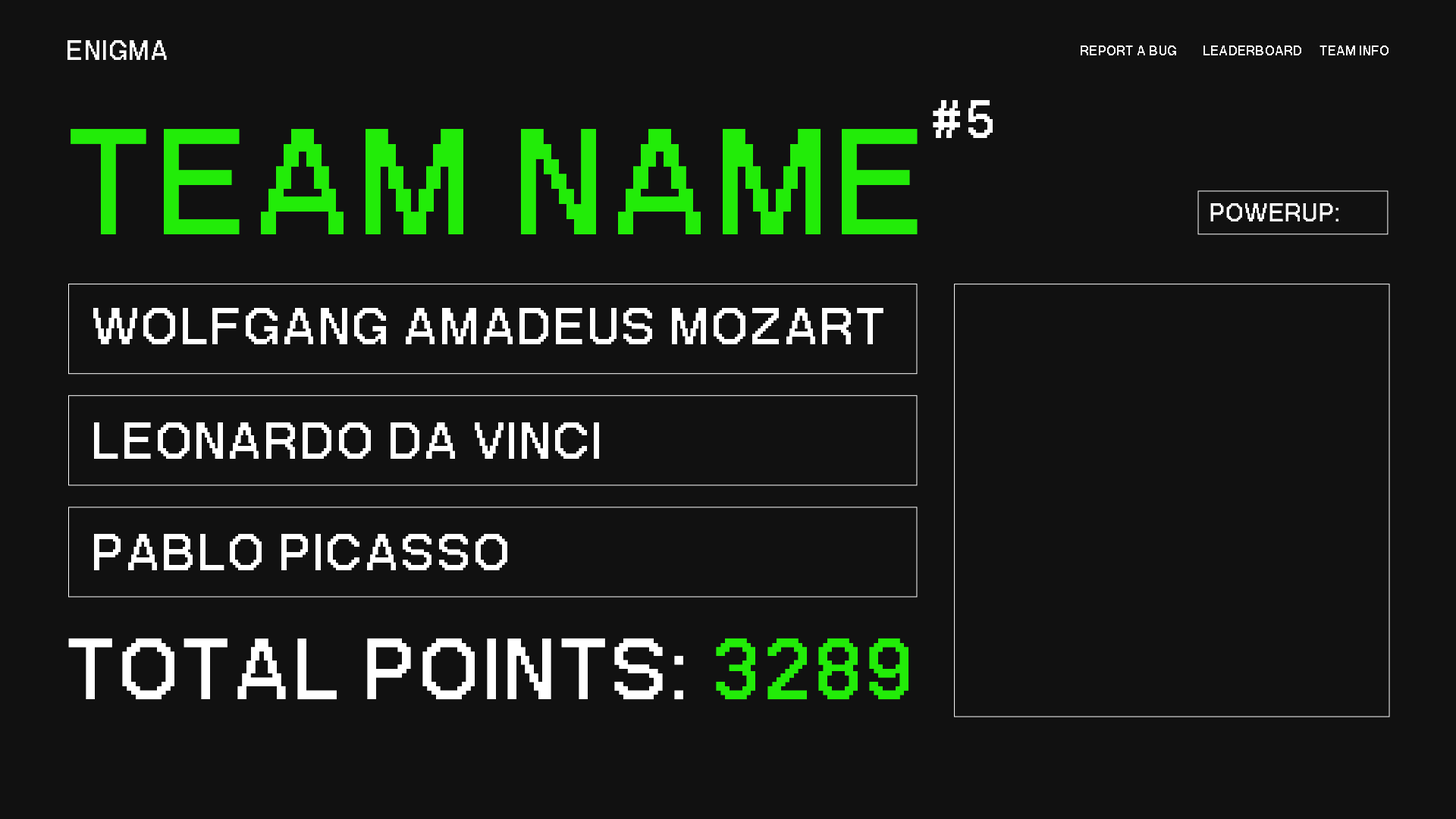
<style>
.page{position:relative;width:1456px;height:819px;background:#111111}
.page>*{position:absolute;margin:0}
.t1{font:38.4px "PPNeueBit-Bold";letter-spacing:0.03em;color:#ffffff}
.t2{font:18.7px "PPNeueBit-Bold";letter-spacing:0.03em;color:#ffffff}
.t3{font:75.6px "PPNeueBit-Bold";letter-spacing:0.03em;color:#ffffff}
.t4{font:211.3px "PPNeueBit-Bold";letter-spacing:0.03em;color:#22ec08}
.t5{font:35.6px "PPNeueBit-Bold";letter-spacing:0.03em;color:#ffffff}
.t6{font:73.3px "PPNeueBit-Bold";letter-spacing:0.03em;color:#ffffff}
.t7{font:121.1px "PPNeueBit-Bold";letter-spacing:0.03em;color:#ffffff}
.t8{font:121.1px "PPNeueBit-Bold";letter-spacing:0.03em;color:#22ec08}
</style>
<div class="page">
<p class="t1" style="left:67px;top:40px;width:100px;height:20px">ENIGMA</p>
<p class="t2" style="left:1081px;top:45px;width:95px;height:10px">REPORT A BUG</p>
<p class="t2" style="left:1203px;top:45px;width:98px;height:10px">LEADERBOARD</p>
<p class="t2" style="left:1319px;top:45px;width:69px;height:10px">TEAM INFO</p>
<p class="t3" style="left:933px;top:100px;width:60px;height:38px">#5</p>
<p class="t4" style="left:71px;top:129px;width:847px;height:105px">TEAM NAME</p>
<p class="t5" style="left:1210px;top:203px;width:128px;height:18px">POWERUP:</p>
<p class="t6" style="left:93px;top:308px;width:790px;height:36px">WOLFGANG AMADEUS MOZART</p>
<p class="t6" style="left:94px;top:422px;width:505px;height:37px">LEONARDO DA VINCI</p>
<p class="t6" style="left:94px;top:534px;width:413px;height:36px">PABLO PICASSO</p>
<p class="t7" style="left:68px;top:638px;width:840px;height:62px">TOTAL POINTS:<span class="t8"> 3289</span></p>
</div>
